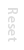
<style>
.page{position:relative;width:24px;height:50px;background:#ffffff}
.page>*{position:absolute;margin:0}
.t1{font:14px "MyriadPro-Semibold";letter-spacing:0.02em;color:#dddddd}
</style>
<div class="page">
<p class="t1" style="left:8px;top:8px;width:10px;height:34px;rotate:90deg">Reset</p>
</div>
